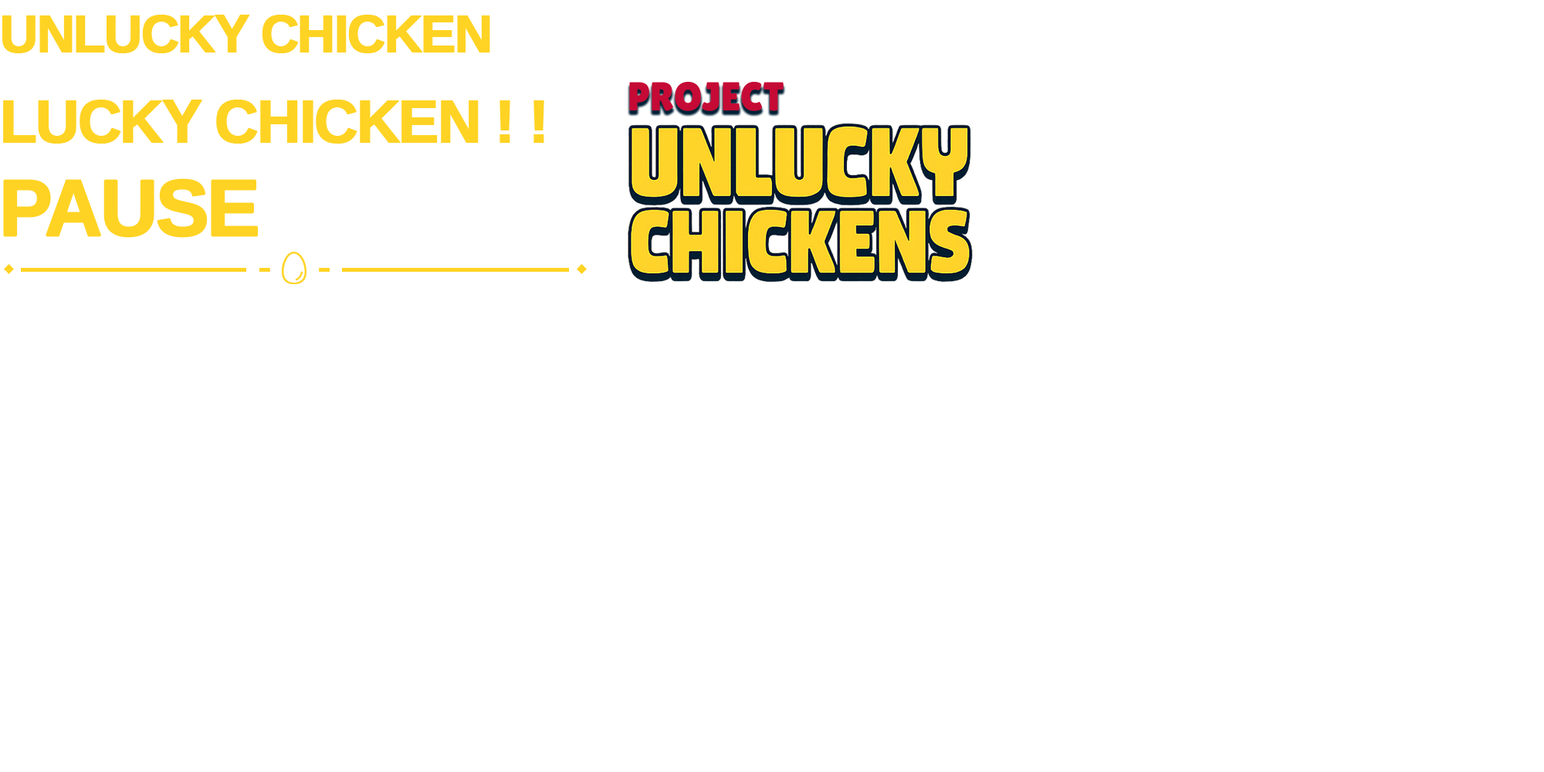
<style>
.page{position:relative;width:1544px;height:772px;background:#ffffff}
.page>*{position:absolute;margin:0}
.t1{font:52.5px "LiberationSans-Bold";letter-spacing:-0.05em;color:#ffd323;font-weight:bold}
.t2{font:60.2px "LiberationSans-Bold";letter-spacing:-0.05em;color:#ffd323;font-weight:bold}
.t3{font:79.5px "LiberationSans-Bold";letter-spacing:-0.05em;color:#ffd323;font-weight:bold}
</style>
<div class="page">
<p class="t1" style="left:2px;top:15px;width:488px;height:38px">UNLUCKY CHICKEN</p>
<p class="t2" style="left:3px;top:100px;width:541px;height:44px">LUCKY CHICKEN ! !</p>
<p class="t3" style="left:3px;top:178px;width:256px;height:60px">PAUSE</p>
</div>
